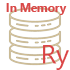
<style>
.page{position:relative;width:70px;height:70px;background:#ffffff}
.page>*{position:absolute;margin:0}
.t1{font:12px "SegoeUI-Bold";color:#d94847}
</style>
<div class="page">
<p class="t1" style="left:6px;top:3px;width:61px;height:12px">In Memory</p>
</div>
